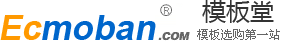
<style>
.page{position:relative;width:281px;height:41px;background:#ffffff}
.page>*{position:absolute;margin:0}
.t1{font:24px "MicrosoftYaHei";color:#333333}
.t2{font:35px "Arial-BoldMT";color:#0066cb;font-style:italic}
.t3{font:35px "Arial-BoldMT";color:#ff9900;font-style:italic}
.t4{font:12px "SimSun";color:#666666}
</style>
<div class="page">
<p class="t1" style="left:202px;top:0px;width:72px;height:23px">模板堂</p>
<p class="t2" style="left:0px;top:15px;width:156px;height:25px"><span class="t3">Ec</span>moban</p>
<p class="t4" style="left:197px;top:29px;width:83px;height:11px">模板选购第一站</p>
</div>
